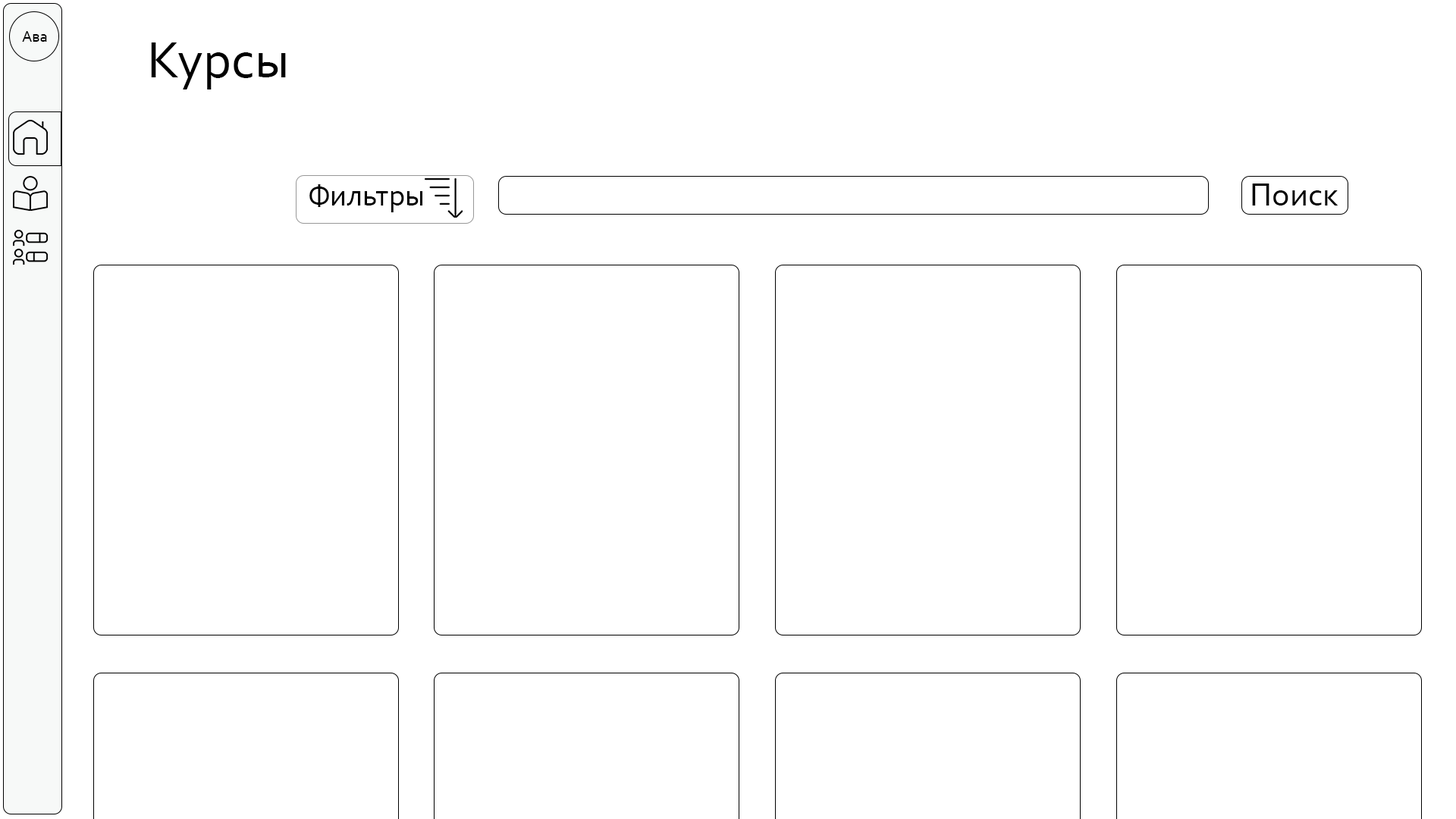
<style>
.page{position:relative;width:1456px;height:819px;background:#ffffff}
.page>*{position:absolute;margin:0}
.t1{font:15.9px "Corbel";color:#000000}
.t2{font:53.1px "Corbel";color:#000000}
.t3{font:30.3px "Corbel";color:#000000}
.t4{font:33.4px "Corbel";color:#000000}
</style>
<div class="page">
<p class="t1" style="left:22px;top:31px;width:25px;height:11px">Ава</p>
<p class="t2" style="left:151px;top:42px;width:135px;height:47px">Курсы</p>
<p class="t3" style="left:309px;top:184px;width:113px;height:28px">Фильтры</p>
<p class="t4" style="left:1252px;top:184px;width:86px;height:22px">Поиск</p>
</div>
